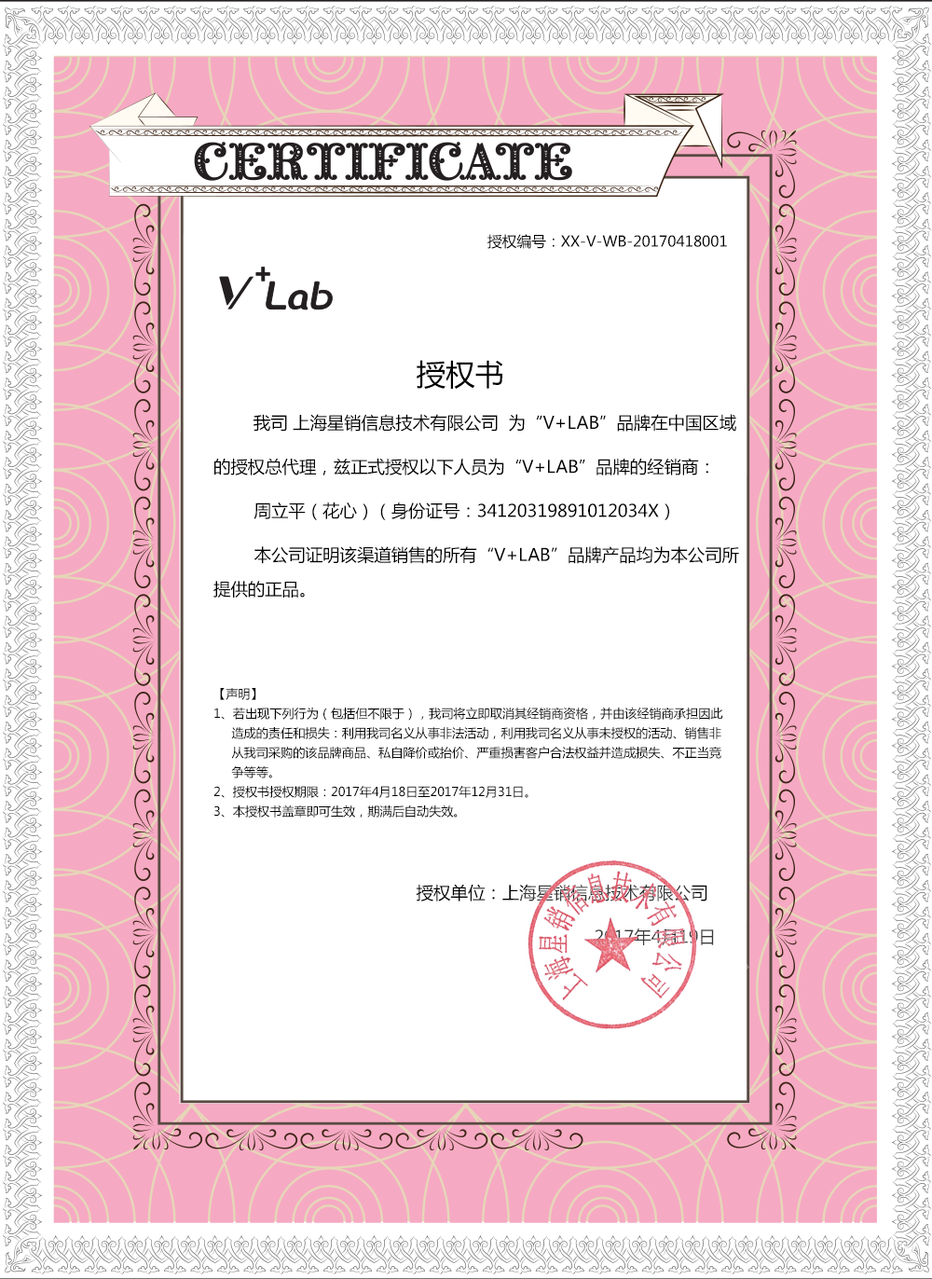
<style>
.page{position:relative;width:932px;height:1279px;background:#ffffff}
.page>*{position:absolute;margin:0}
.t1{font:12.2px/19.6px "MicrosoftYaHei";color:#000000}
.t2{font:14.7px "MicrosoftYaHei";color:#000000}
.t3{font:29.4px/44.1px "MicrosoftYaHei";color:#000000}
.t4{font:17.1px/44.1px "MicrosoftYaHei";color:#000000}
.t5{font:17.1px/34.3px "MicrosoftYaHei";color:#000000}
.t6{font:12.2px/34.3px "MicrosoftYaHei";color:#000000}
</style>
<div class="page">
<p class="t1" style="left:213px;top:234px;width:526px;height:711px"><span class="t2">                                                               授权编号：XX-V-WB-20170418001<br><br><br><br><br>                                </span><span class="t3">  授权书<br>       </span><span class="t4">我司 上海星销信息技术有限公司  为“V+LAB”品牌在中国区域<br>的授权总代理，兹正式授权以下人员为“V+LAB”品牌的经销商：<br>        周立平（花心）（身份证号：34120319891012034X）<br>        本公司证明该渠道销售的所有</span><span class="t5">“V+LAB”品牌产品均为本公司所<br>提供的正品。<br><br><br></span><span class="t6">【声明】<br></span>1、若出现下列行为（包括但不限于），我司将立即取消其经销商资格，并由该经销商承担因此<br>     造成的责任和损失：利用我司名义从事非法活动，利用我司名义从事未授权的活动、销售非<br>     从我司采购的该品牌商品、私自降价或抬价、严重损害客户合法权益并造成损失、不正当竞<br>     争等等。<br>2、授权书授权期限：2017年4月18日至2017年12月31日。<br>3、本授权书盖章即可生效，期满后自动失效。<br><br><br>                                                        <span class="t4">授权单位：上海星销信息技术有限公司<br>                                                                           2017年4月19日</span></p>
</div>
